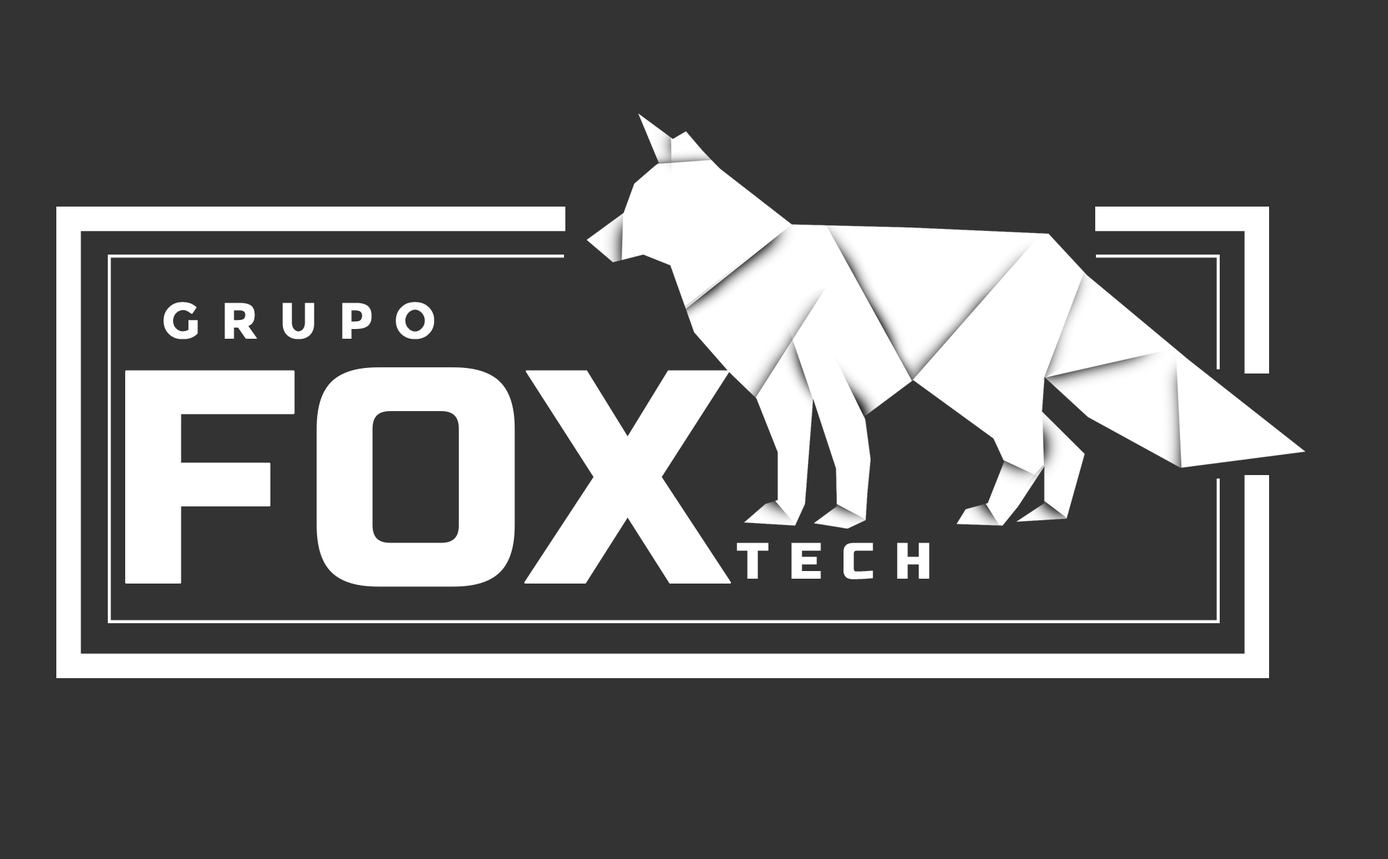
<style>
.page{position:relative;width:1388px;height:859px;background:#333333}
.page>*{position:absolute;margin:0}
.t1{font:50.2px "Montserrat-Bold";letter-spacing:0.4em;color:#ffffff;font-weight:bold}
.t2{font:302.4px "RussoOne-Regular";color:#ffffff;font-weight:bold}
.t3{font:50.1px "RussoOne-Regular";letter-spacing:0.4em;color:#ffffff;text-transform:uppercase;font-weight:bold}
</style>
<div class="page">
<p class="t1" style="left:163px;top:302px;width:272px;height:37px">GRUPO</p>
<p class="t2" style="left:125px;top:367px;width:607px;height:220px">FOX</p>
<p class="t3" style="left:737px;top:542px;width:193px;height:37px">tech</p>
</div>
